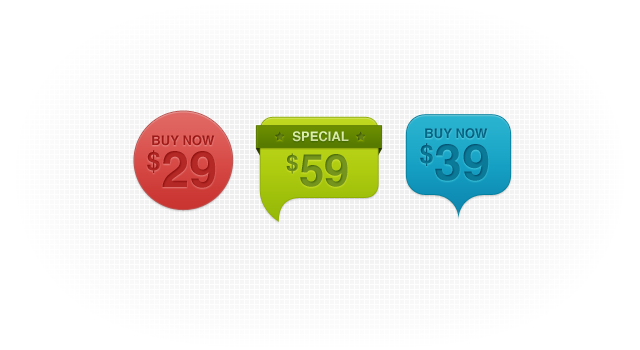
<style>
.page{position:relative;width:640px;height:350px;background:#ffffff}
.page>*{position:absolute;margin:0}
.t1{font:13px "Helvetica-Bold";color:#b42825}
.t2{font:13px "Helvetica-Bold";color:#def0ab;text-transform:uppercase}
.t3{font:13px "Helvetica-Bold";color:#076483}
.t4{font:25.2px "Helvetica-Bold";color:#b42825}
.t5{font:25.2px "Helvetica-Bold";color:#0a7a98}
.t6{font:50.3px "Helvetica-Bold";color:#0a7a98}
.t7{font:50.3px "Helvetica-Bold";color:#b42825}
.t8{font:22.6px "Helvetica-Bold";color:#74941d}
.t9{font:45.3px "Helvetica-Bold";color:#74941d}
</style>
<div class="page">
<p class="t1" style="left:152px;top:135px;width:63px;height:11px">BUY NOW</p>
<p class="t2" style="left:292px;top:131px;width:57px;height:11px">special</p>
<p class="t3" style="left:425px;top:128px;width:63px;height:11px">BUY NOW</p>
<p class="t4" style="left:147px;top:150px;width:13px;height:23px">$</p>
<p class="t5" style="left:420px;top:143px;width:13px;height:23px">$</p>
<p class="t6" style="left:435px;top:144px;width:54px;height:37px">39</p>
<p class="t7" style="left:162px;top:151px;width:54px;height:37px">29</p>
<p class="t8" style="left:286px;top:153px;width:12px;height:21px">$</p>
<p class="t9" style="left:300px;top:154px;width:48px;height:33px">59</p>
</div>
